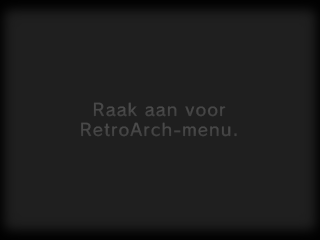
<style>
.page{position:relative;width:320px;height:240px;background:#1f1f1f}
.page>*{position:absolute;margin:0}
.t1{font:17px/20px "SCEPS3RodinLATIN-Regular";letter-spacing:0.056em;color:#575757}
</style>
<div class="page">
<p class="t1" style="left:81px;top:102px;width:156px;height:35px;text-align:center">Raak aan voor<br>RetroArch-menu.</p>
</div>
